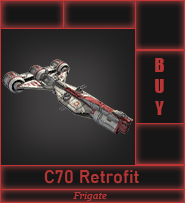
<style>
.page{position:relative;width:185px;height:203px}
.page>*{position:absolute;margin:0}
.t1{font:18px "Impact";color:#b73535}
.t2{font:18px "Bahnschrift";color:#b73535}
</style>
<div class="page">
<p class="t1" style="left:155px;top:58px;width:9px;height:57px;text-align:center">B<br>U<br>Y</p>
<p class="t2" style="left:44px;top:169px;width:95px;height:15px">C70 Retrofit</p>
</div>
